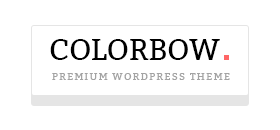
<style>
.page{position:relative;width:280px;height:130px;background:#ffffff}
.page>*{position:absolute;margin:0}
.t1{font:30px "Bitter-Regular";letter-spacing:-0.01em;color:#000000;text-transform:uppercase}
.t2{font:10px "Bitter-Regular";letter-spacing:0.13em;color:#a3a3a3;text-transform:uppercase}
</style>
<div class="page">
<p class="t1" style="left:50px;top:39px;width:170px;height:21px">colorbow</p>
<p class="t2" style="left:52px;top:73px;width:178px;height:7px">Premium WordPress Theme</p>
</div>
